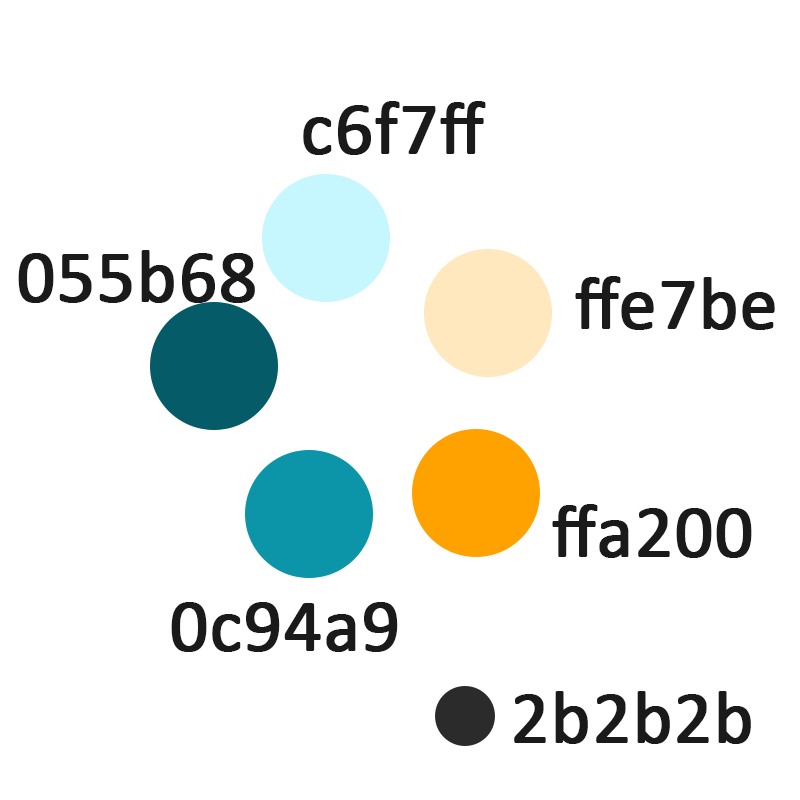
<style>
.page{position:relative;width:800px;height:800px;background:#ffffff}
.page>*{position:absolute;margin:0}
.t1{font:75px "Calibri";color:#1a1a1a;font-weight:bold}
</style>
<div class="page">
<p class="t1" style="left:303px;top:101px;width:183px;height:54px">c6f7ff</p>
<p class="t1" style="left:18px;top:250px;width:237px;height:53px">055b68</p>
<p class="t1" style="left:575px;top:276px;width:200px;height:54px">ffe7be</p>
<p class="t1" style="left:552px;top:504px;width:200px;height:54px">ffa200</p>
<p class="t1" style="left:171px;top:602px;width:227px;height:50px">0c94a9</p>
<p class="t1" style="left:514px;top:691px;width:237px;height:53px">2b2b2b</p>
</div>
